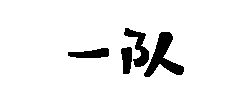
<style>
.page{position:relative;width:250px;height:100px;background:#ffffff}
.page>*{position:absolute;margin:0}
.t1{font:72px "ZXF-Mengxin-Trial";letter-spacing:0.075em;color:#000000;font-weight:bold}
</style>
<div class="page">
<p class="t1" style="left:68px;top:28px;width:116px;height:49px">一队</p>
</div>
